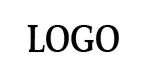
<style>
.page{position:relative;width:147px;height:80px;background:#ffffff}
.page>*{position:absolute;margin:0}
.t1{font:39px "BookAntiqua-Bold";color:#0a0a0a;scale:0.77 1}
</style>
<div class="page">
<p class="t1" style="left:27px;top:25px;width:92px;height:27px">LOGO</p>
</div>
